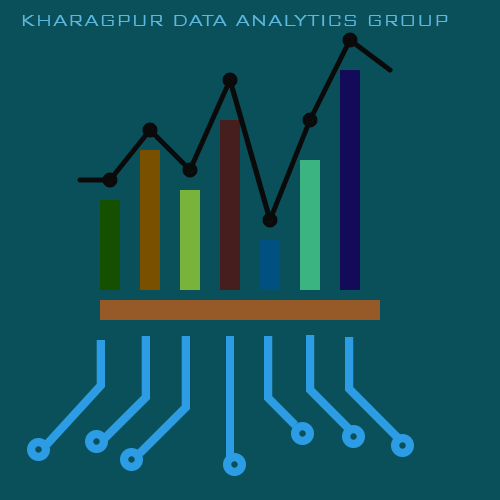
<style>
.page{position:relative;width:500px;height:500px;background:#0a505a}
.page>*{position:absolute;margin:0}
.t1{font:20.7px "BankGothicBT-Light";color:#5bb8df}
</style>
<div class="page">
<p class="t1" style="left:22px;top:15px;width:426px;height:11px">KHARAGPUR DATA ANALYTICS GROUP</p>
</div>
